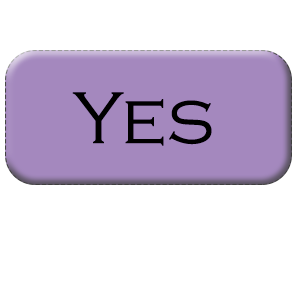
<style>
.page{position:relative;width:300px;height:300px;background:#ffffff}
.page>*{position:absolute;margin:0}
.t1{font:76.2px "CopperplateGothic-Light";color:#000000}
</style>
<div class="page">
<p class="t1" style="left:72px;top:92px;width:140px;height:54px">Yes</p>
</div>
